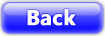
<style>
.page{position:relative;width:105px;height:36px}
.page>*{position:absolute;margin:0}
.t1{font:21.4px "SegoeUI-Bold";color:#fdfafa;font-weight:bold}
</style>
<div class="page">
<p class="t1" style="left:27px;top:9px;width:49px;height:17px">Back</p>
</div>
